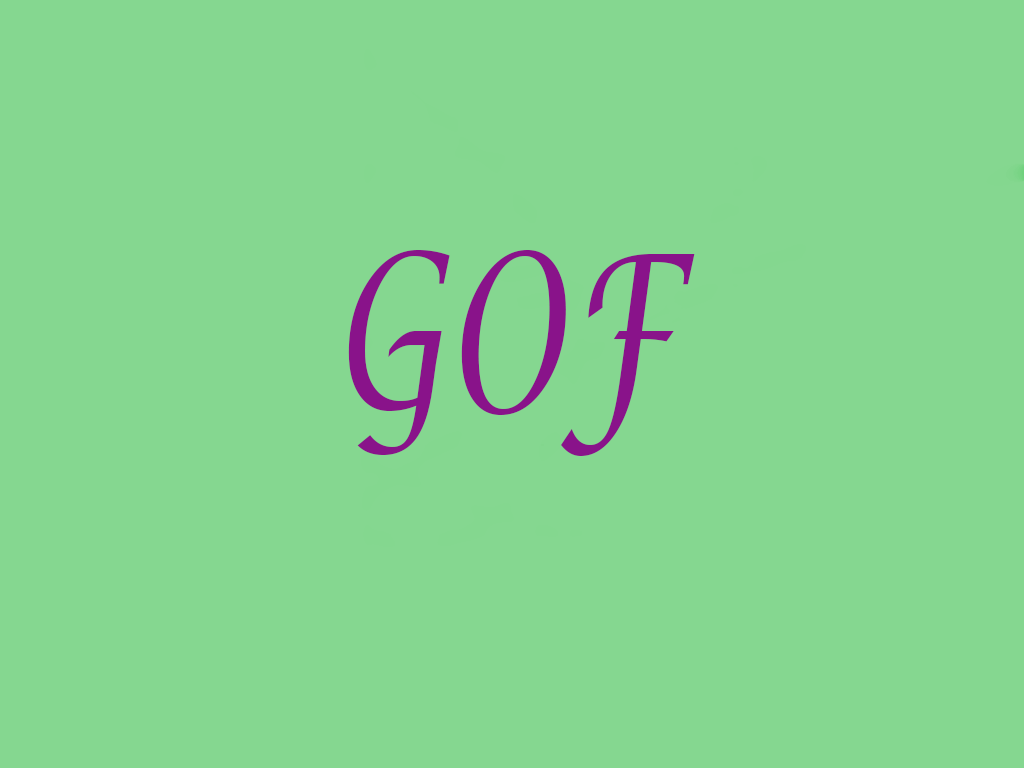
<style>
.page{position:relative;width:1024px;height:768px;background:#85d790}
.page>*{position:absolute;margin:0}
.t1{font:216.6px "LucidaCalligraphy-Italic";color:#89138a;scale:0.69 1}
</style>
<div class="page">
<p class="t1" style="left:348px;top:250px;width:347px;height:206px">GOF</p>
</div>
